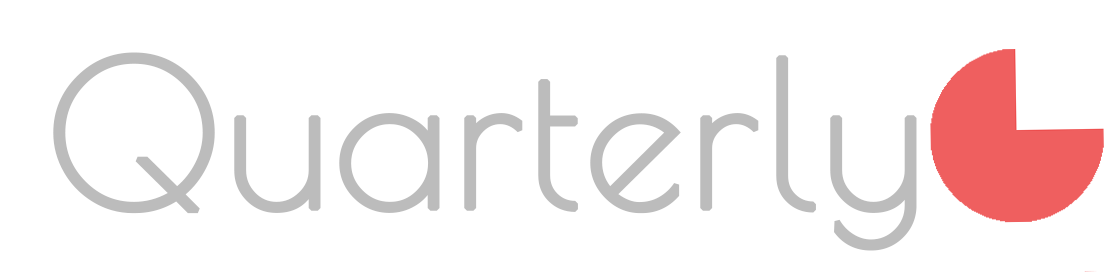
<style>
.page{position:relative;width:1119px;height:277px;background:#ffffff}
.page>*{position:absolute;margin:0}
.t1{font:200px "PoiretOne-Regular";letter-spacing:0.005em;color:#bcbcbc;font-weight:bold}
</style>
<div class="page">
<p class="t1" style="left:53px;top:52px;width:864px;height:199px">Quarterly</p>
</div>
